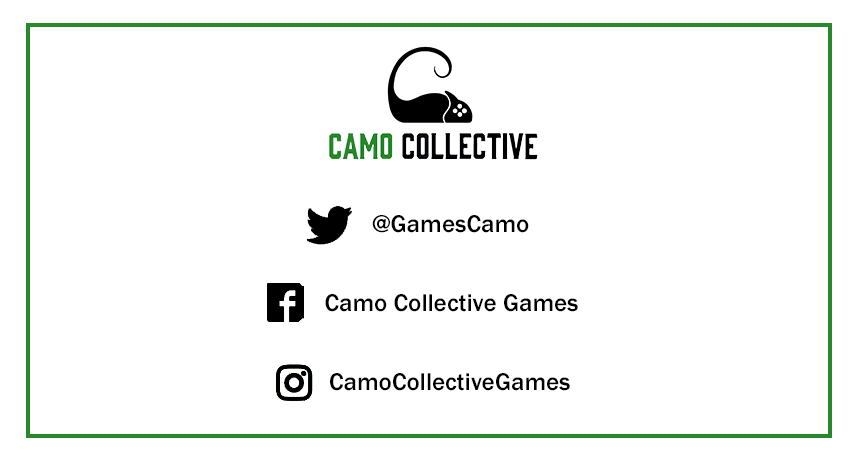
<style>
.page{position:relative;width:860px;height:458px;background:#ffffff}
.page>*{position:absolute;margin:0}
.t1{font:25px "FranklinGothic-Medium";color:#000000}
</style>
<div class="page">
<p class="t1" style="left:372px;top:215px;width:157px;height:18px">@GamesCamo</p>
<p class="t1" style="left:325px;top:294px;width:253px;height:18px">Camo Collective Games</p>
<p class="t1" style="left:330px;top:373px;width:240px;height:18px">CamoCollectiveGames</p>
</div>
